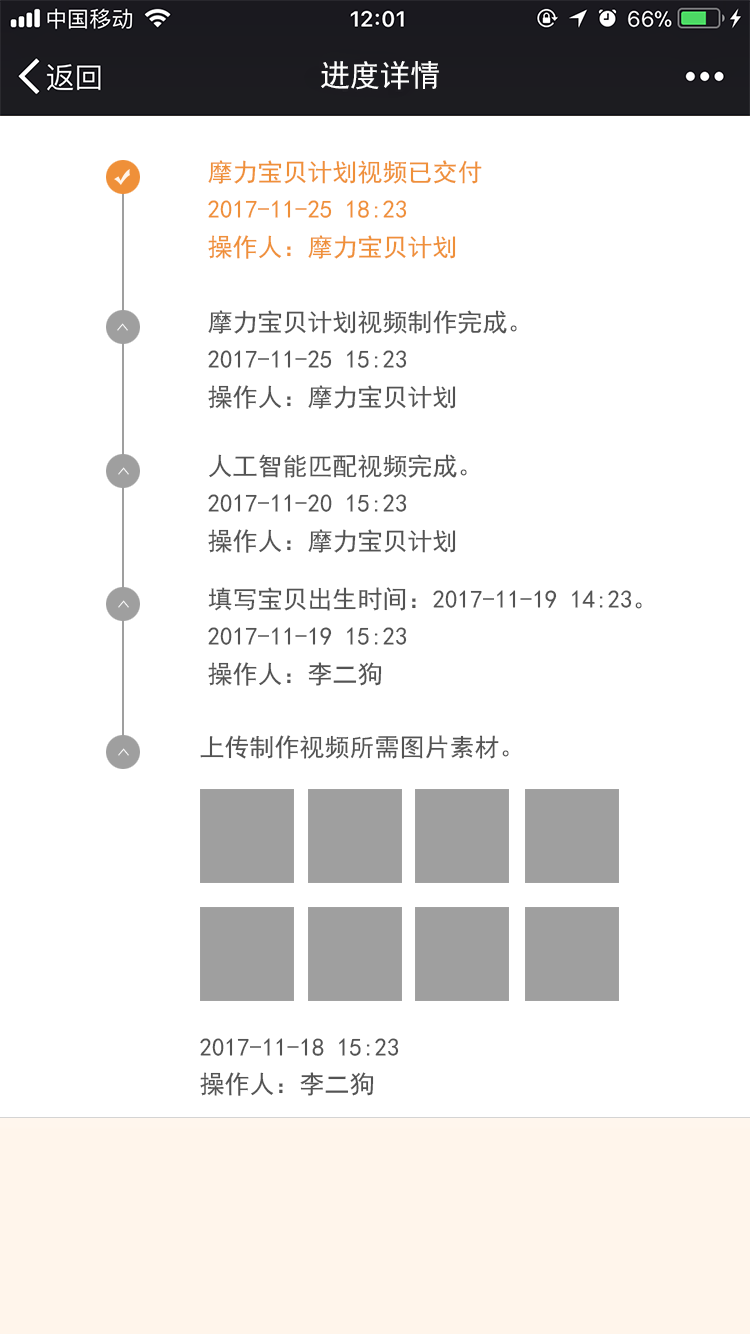
<style>
.page{position:relative;width:750px;height:1334px;background:#ffffff}
.page>*{position:absolute;margin:0}
.t1{font:30.5px "SimHei";color:#ffffff}
.t2{font:25px/37.5px "SimHei";color:#ef9039}
.t3{font:25px/37.5px "SimHei";color:#535353}
.t4{font:14.8px "SimHei";color:#ffffff;scale:1.08 1}
</style>
<div class="page">
<p class="t1" style="left:321px;top:61px;width:118px;height:29px">进度详情</p>
<p class="t2" style="left:208px;top:160px;width:274px;height:99px">摩力宝贝计划视频已交付<br>2017-11-25 18:23<br>操作人：摩力宝贝计划</p>
<p class="t3" style="left:208px;top:310px;width:309px;height:99px">摩力宝贝计划视频制作完成。<br>2017-11-25 15:23<br>操作人：摩力宝贝计划</p>
<p class="t4" style="left:117px;top:323px;width:11px;height:8px;rotate:-90deg">&gt;</p>
<p class="t3" style="left:208px;top:454px;width:259px;height:99px">人工智能匹配视频完成。<br>2017-11-20 15:23<br>操作人：摩力宝贝计划</p>
<p class="t4" style="left:118px;top:467px;width:11px;height:8px;rotate:-90deg">&gt;</p>
<p class="t3" style="left:208px;top:587px;width:434px;height:99px">填写宝贝出生时间：2017-11-19 14:23。<br>2017-11-19 15:23<br>操作人：李二狗</p>
<p class="t4" style="left:118px;top:600px;width:11px;height:8px;rotate:-90deg">&gt;</p>
<p class="t3" style="left:200px;top:735px;width:309px;height:361px">上传制作视频所需图片素材。<br><br><br><br><br><br><br><br>2017-11-18 15:23<br>操作人：李二狗</p>
<p class="t4" style="left:118px;top:748px;width:11px;height:8px;rotate:-90deg">&gt;</p>
</div>
